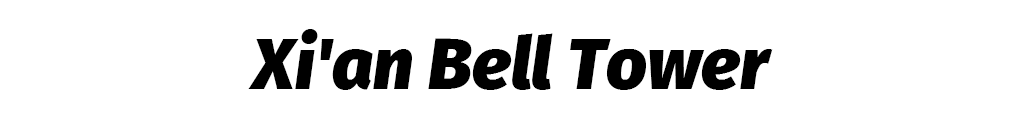
<style>
.page{position:relative;width:1024px;height:128px;background:#ffffff}
.page>*{position:absolute;margin:0}
.t1{font:71.8px "FiraSans-BlackItalic";color:#000000}
</style>
<div class="page">
<p class="t1" style="left:248px;top:29px;width:525px;height:61px">Xi'an Bell Tower</p>
</div>
